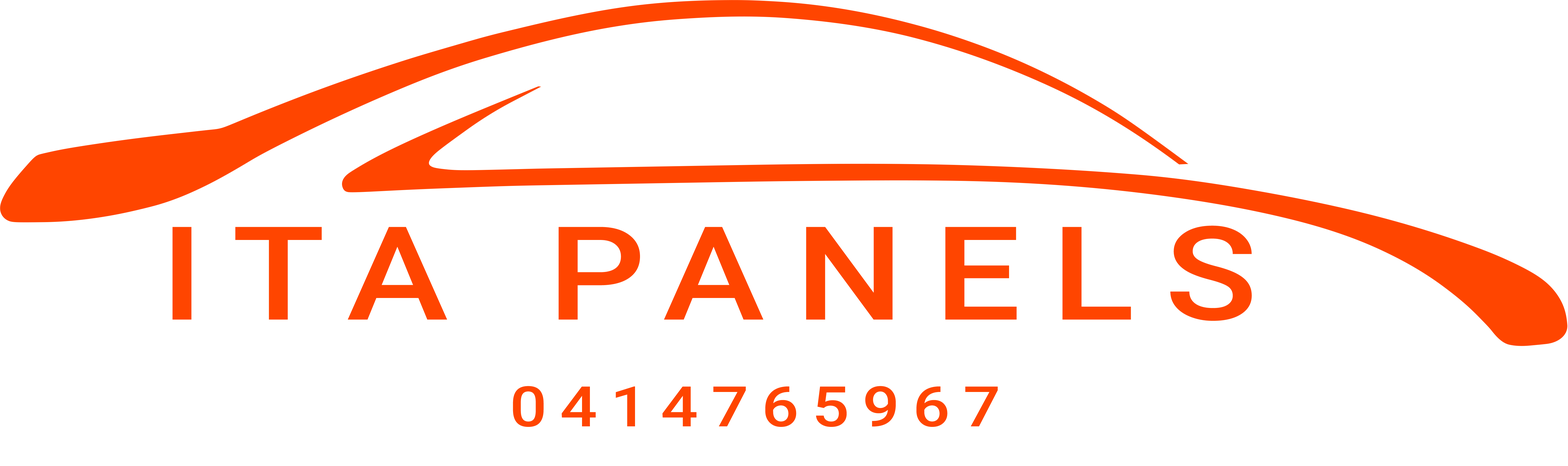
<style>
.page{position:relative;width:1568px;height:466px;background:#ffffff}
.page>*{position:absolute;margin:0}
.t1{font:130.1px "Roboto-Medium";letter-spacing:0.2em;color:#ff4500;scale:1.18 1}
.t2{font:55.7px "Roboto-Medium";letter-spacing:0.2em;color:#ff4500;scale:1.18 1}
</style>
<div class="page">
<p class="t1" style="left:172px;top:225px;width:1080px;height:96px">ITA PANELS</p>
<p class="t2" style="left:513px;top:386px;width:485px;height:40px">0414765967</p>
</div>
